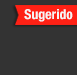
<style>
.page{position:relative;width:77px;height:75px;background:#333333}
.page>*{position:absolute;margin:0}
.t1{font:13.8px "HelveticaNeue-CondensedBold";color:#f5f5f5}
</style>
<div class="page">
<p class="t1" style="left:24px;top:9px;width:49px;height:13px">Sugerido</p>
</div>
